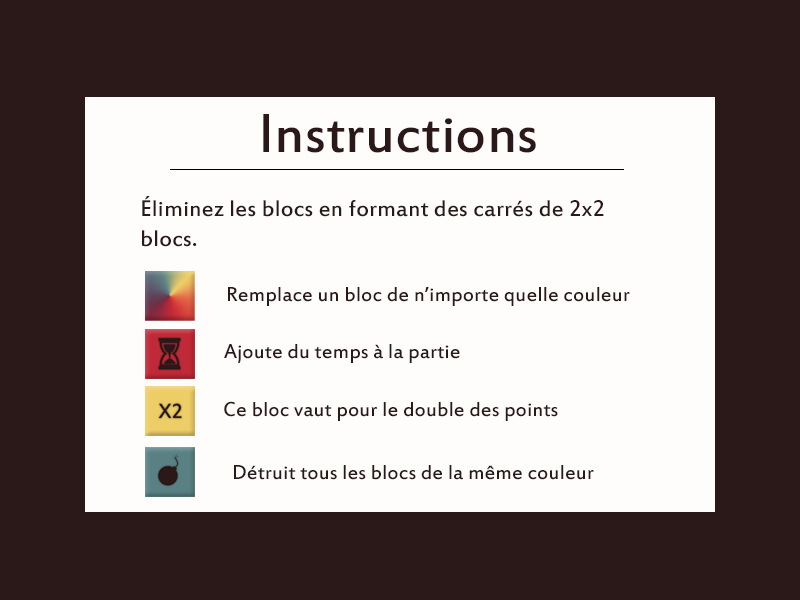
<style>
.page{position:relative;width:800px;height:600px;background:#fffcfc}
.page>*{position:absolute;margin:0}
.t1{font:60px "EstrangeloEdessa";color:#2b1818}
.t2{font:25px "EstrangeloEdessa";color:#2b1818}
.t3{font:22px "EstrangeloEdessa";color:#2b1818}
</style>
<div class="page">
<p class="t1" style="left:263px;top:114px;width:273px;height:39px">Instructions</p>
<p class="t2" style="left:142px;top:196px;width:462px;height:51px">Éliminez les blocs en formant des carrés de 2x2 blocs.</p>
<p class="t3" style="left:228px;top:287px;width:402px;height:19px">Remplace un bloc de n’importe quelle couleur</p>
<p class="t3" style="left:224px;top:344px;width:236px;height:19px">Ajoute du temps à la partie</p>
<p class="t3" style="left:224px;top:401px;width:334px;height:20px">Ce bloc vaut pour le double des points</p>
<p class="t3" style="left:234px;top:465px;width:360px;height:15px">Détruit tous les blocs de la même couleur</p>
</div>
